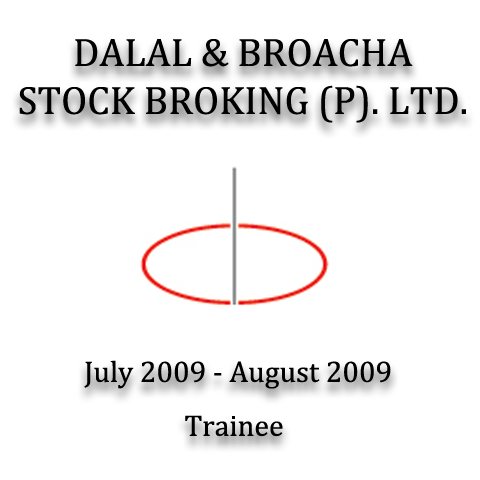
<style>
.page{position:relative;width:480px;height:480px;background:#ffffff}
.page>*{position:absolute;margin:0}
.t1{font:40px "Cambria";color:#000000}
.t2{font:30px "Cambria";color:#000000}
</style>
<div class="page">
<p class="t1" style="left:19px;top:39px;width:447px;height:84px;text-align:center">DALAL &amp; BROACHA<br>STOCK BROKING (P). LTD.</p>
<p class="t2" style="left:84px;top:360px;width:307px;height:29px">July 2009 - August 2009</p>
<p class="t2" style="left:185px;top:415px;width:98px;height:22px">Trainee</p>
</div>
